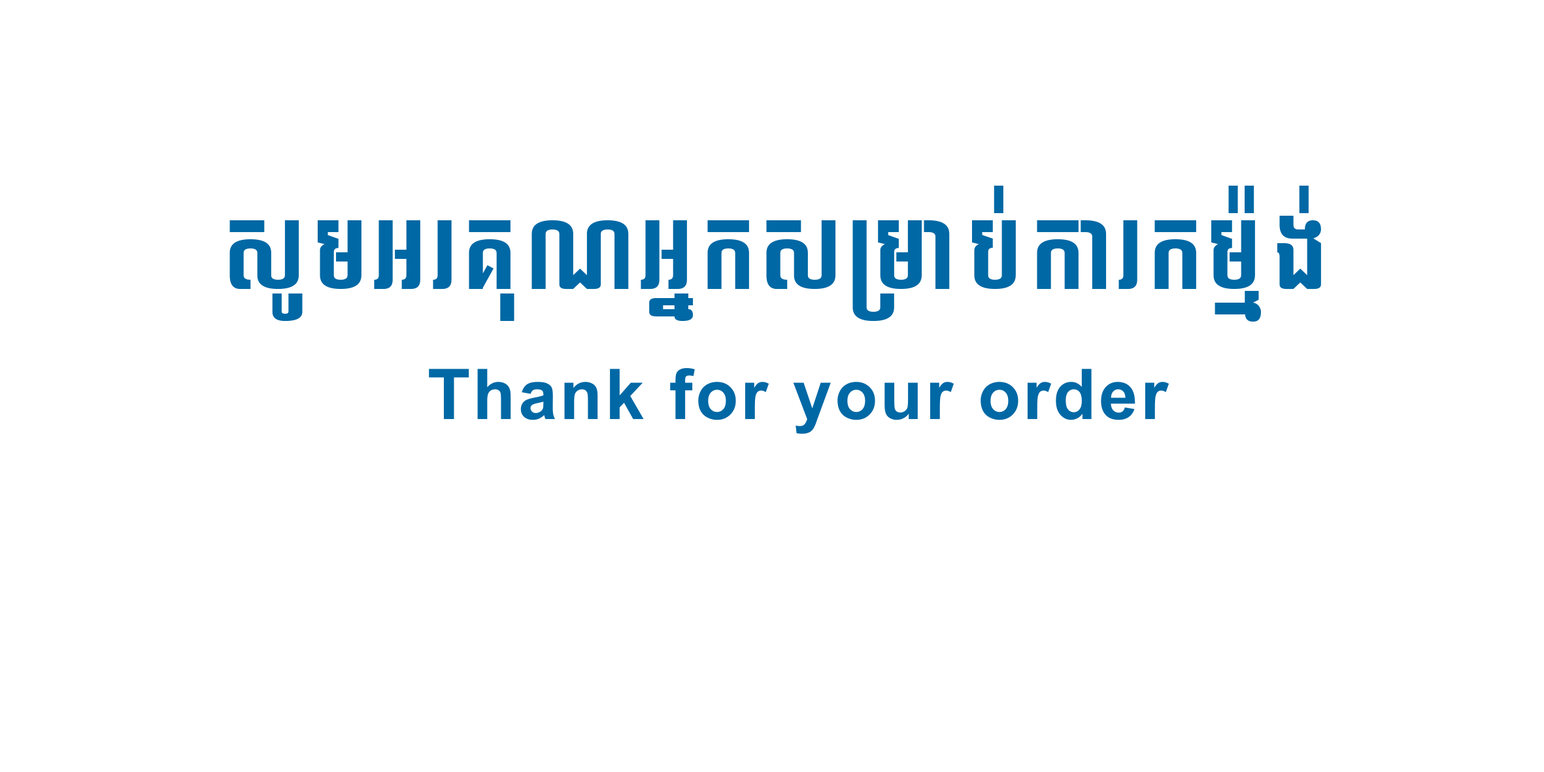
<style>
.page{position:relative;width:1544px;height:772px;background:#ffffff}
.page>*{position:absolute;margin:0}
.t1{font:94px "Bayon";letter-spacing:0.04em;color:#0068a5}
.t2{font:69.9px "AKbalthomKbach";letter-spacing:0.04em;color:#0068a5}
</style>
<div class="page">
<p class="t1" style="left:229px;top:186px;width:1092px;height:136px">សូមអរគុណអ្នកសម្រាប់ការកម្ម៉ង់</p>
<p class="t2" style="left:429px;top:368px;width:740px;height:66px">Thank for your order</p>
</div>
